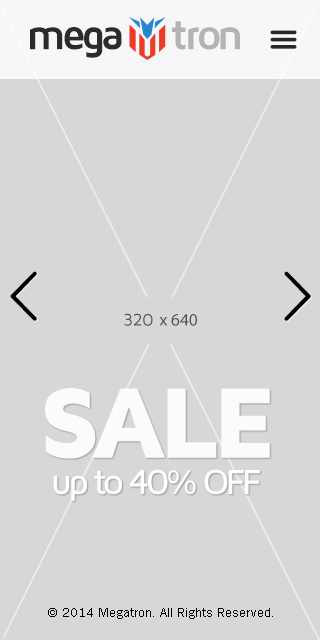
<style>
.page{position:relative;width:320px;height:640px;background:#d7d7d7}
.page>*{position:absolute;margin:0}
.t1{font:43.8px "MavenProBold";letter-spacing:-0.1em;color:#2b2b2b}
.t2{font:43.8px "MavenProBold";letter-spacing:-0.1em;color:#b4b4b4}
.t3{font:103.4px "MavenProBlack";letter-spacing:-0.06em;color:#ffffff}
.t4{font:35.9px "MavenProMedium";letter-spacing:-0.105em;color:#ffffff}
.t5{font:13px "TradeGothicW01-Roman";color:#000000}
</style>
<div class="page">
<p class="t1" style="left:30px;top:21px;width:210px;height:37px">mega     <span class="t2">tron</span></p>
<p class="t3" style="left:45px;top:388px;width:225px;height:71px;opacity:0.9">SALE</p>
<p class="t4" style="left:53px;top:469px;width:207px;height:32px">up to 40% OFF</p>
<p class="t5" style="left:48px;top:608px;width:225px;height:11px">© 2014 Megatron. All Rights Reserved.</p>
</div>
